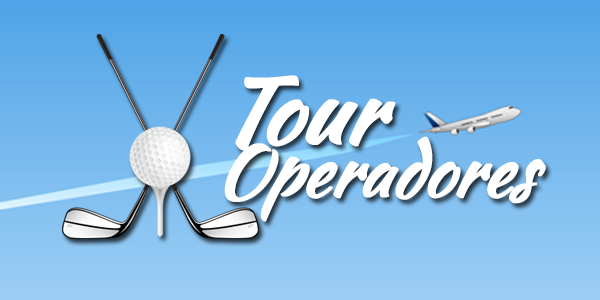
<style>
.page{position:relative;width:600px;height:300px}
.page>*{position:absolute;margin:0}
.t1{font:90px "KaushanScript-Regular";letter-spacing:-0.025em;color:#ffffff;font-weight:bold;font-style:italic}
.t2{font:70px "KaushanScript-Regular";letter-spacing:-0.025em;color:#ffffff;font-weight:bold;font-style:italic}
</style>
<div class="page">
<p class="t1" style="left:235px;top:75px;width:161px;height:76px">Tour</p>
<p class="t2" style="left:224px;top:136px;width:322px;height:86px">Operadores</p>
</div>
